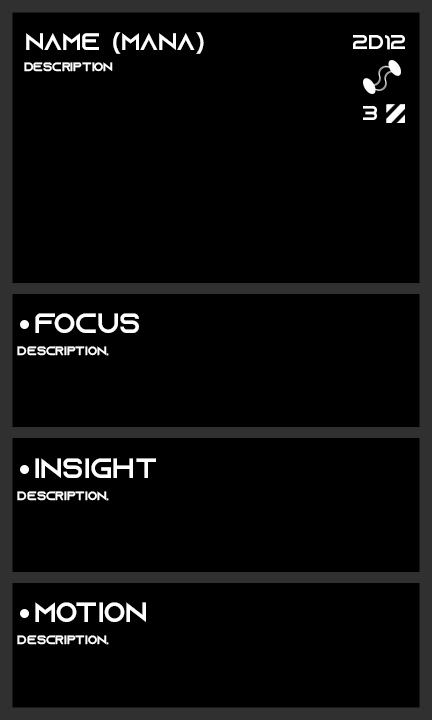
<style>
.page{position:relative;width:432px;height:720px;background:#000000}
.page>*{position:absolute;margin:0}
.t1{font:24px "AzonixRegular";color:#ffffff}
.t2{font:20px "AzonixRegular";color:#ffffff}
.t3{font:12px "AzonixRegular";color:#ffffff}
.t4{font:28px "AzonixRegular";color:#ffffff}
</style>
<div class="page">
<p class="t1" style="left:26px;top:32px;width:178px;height:22px">name (mana)</p>
<p class="t2" style="left:353px;top:35px;width:52px;height:15px">2d12</p>
<p class="t3" style="left:24px;top:62px;width:89px;height:10px">description</p>
<p class="t2" style="left:363px;top:106px;width:14px;height:14px">3</p>
<p class="t4" style="left:35px;top:313px;width:104px;height:20px">focus</p>
<p class="t3" style="left:17px;top:346px;width:92px;height:10px">description.</p>
<p class="t4" style="left:35px;top:458px;width:121px;height:20px">insight</p>
<p class="t3" style="left:17px;top:491px;width:92px;height:10px">description.</p>
<p class="t4" style="left:35px;top:602px;width:111px;height:20px">motion</p>
<p class="t3" style="left:17px;top:635px;width:92px;height:10px">description.</p>
</div>
